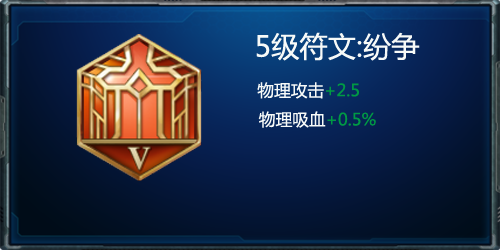
<style>
.page{position:relative;width:500px;height:250px}
.page>*{position:absolute;margin:0}
.t1{font:28.3px "MicrosoftYaHei";color:#f7faf8}
.t2{font:16.7px "MicrosoftYaHei";color:#f7faf8}
.t3{font:16.7px "MicrosoftYaHei";color:#009944}
</style>
<div class="page">
<p class="t1" style="left:256px;top:32px;width:164px;height:96px;text-align:center">5级符文:纷争<br><span class="t2">        物理攻击</span><span class="t3">+2.5<br></span><span class="t2">  物理吸血</span><span class="t3">+0.5%</span></p>
</div>
